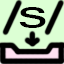
<style>
.page{position:relative;width:64px;height:64px;background:#dcffd4}
.page>*{position:absolute;margin:0}
.t1{font:42.3px "Raavi";color:#000000;scale:1.55 1}
</style>
<div class="page">
<p class="t1" style="left:19px;top:7px;width:27px;height:21px">s</p>
</div>
